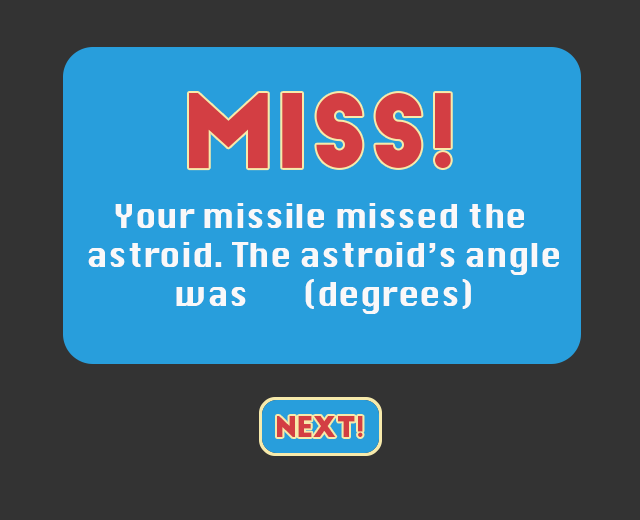
<style>
.page{position:relative;width:640px;height:520px;background:#333333}
.page>*{position:absolute;margin:0}
.t1{font:100px "BigJohn";color:#d33e43}
.t2{font:32.5px "Krungthep";color:#f9f8f9}
.t3{font:28px "BigJohn";color:#d33e43}
</style>
<div class="page">
<p class="t1" style="left:189px;top:93px;width:262px;height:76px">MISS!</p>
<p class="t2" style="left:88px;top:203px;width:471px;height:111px;text-align:center">Your missile missed the <br>astroid. The astroid’s angle<br>was (degrees)</p>
<p class="t3" style="left:277px;top:416px;width:86px;height:21px">NEXT!</p>
</div>
